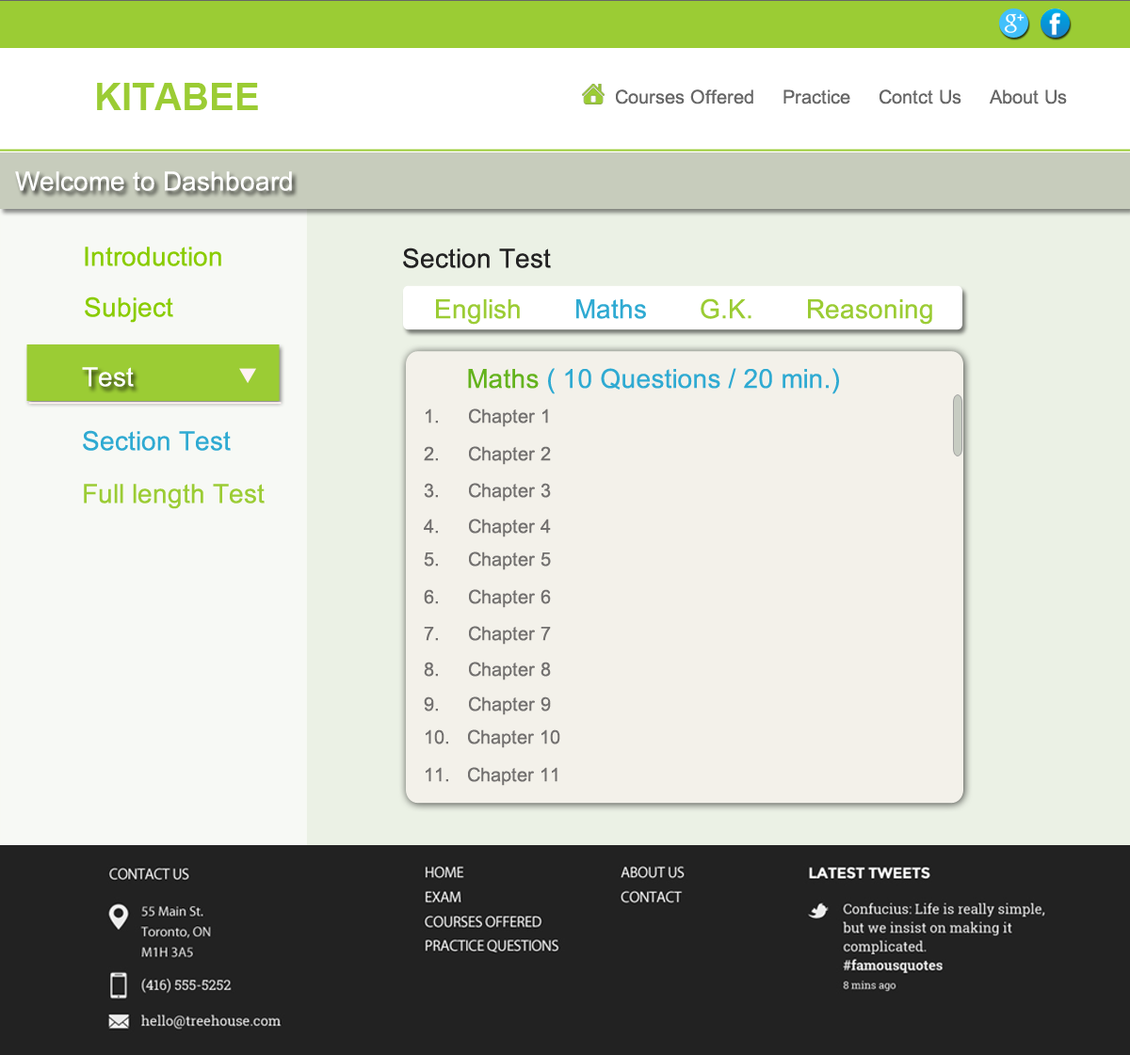
<style>
.page{position:relative;width:1130px;height:1055px}
.page>*{position:absolute;margin:0}
.t1{font:37.7px "Arial-BoldMT";color:#9bcc34}
.t2{font:18.8px "ArialMT";color:#666666}
.t3{font:26.4px "ArialMT";color:#ffffff}
.t4{font:26.4px "ArialMT";color:#8acc00}
.t5{font:26.4px "ArialMT";color:#222222}
.t6{font:26.4px "ArialMT";color:#9bcc34}
.t7{font:26.4px "ArialMT";color:#2faad2}
.t8{font:26.4px "ArialMT";color:#64b31d}
.t9{font:18.8px "ArialMT";color:#72706f}
</style>
<div class="page">
<p class="t1" style="left:97px;top:83px;width:161px;height:27px">KITABEE</p>
<p class="t2" style="left:616px;top:89px;width:451px;height:16px">Courses Offered     Practice     Contct Us     About Us</p>
<p class="t3" style="left:15px;top:171px;width:277px;height:20px">Welcome to Dashboard</p>
<p class="t4" style="left:85px;top:247px;width:136px;height:19px">Introduction</p>
<p class="t5" style="left:403px;top:248px;width:148px;height:20px">Section Test</p>
<p class="t4" style="left:85px;top:297px;width:88px;height:26px">Subject</p>
<p class="t6" style="left:436px;top:298px;width:496px;height:27px">English<span class="t7">       Maths     </span>  G.K.       Reasoning</p>
<p class="t3" style="left:82px;top:367px;width:52px;height:20px">Test</p>
<p class="t7" style="left:468px;top:368px;width:371px;height:26px"><span class="t8">Maths</span> ( 10 Questions / 20 min.)</p>
<p class="t9" style="left:426px;top:409px;width:122px;height:18px">1.     Chapter 1</p>
<p class="t7" style="left:83px;top:430px;width:148px;height:21px">Section Test</p>
<p class="t9" style="left:424px;top:446px;width:127px;height:19px">2.     Chapter 2</p>
<p class="t6" style="left:84px;top:484px;width:181px;height:25px">Full length Test</p>
<p class="t9" style="left:424px;top:483px;width:127px;height:19px">3.     Chapter 3</p>
<p class="t9" style="left:424px;top:519px;width:127px;height:19px">4.     Chapter 4</p>
<p class="t9" style="left:424px;top:552px;width:127px;height:19px">5.     Chapter 5</p>
<p class="t9" style="left:424px;top:589px;width:127px;height:19px">6.     Chapter 6</p>
<p class="t9" style="left:424px;top:626px;width:127px;height:19px">7.     Chapter 7</p>
<p class="t9" style="left:424px;top:662px;width:127px;height:19px">8.     Chapter 8</p>
<p class="t9" style="left:424px;top:697px;width:127px;height:19px">9.     Chapter 9</p>
<p class="t9" style="left:426px;top:730px;width:134px;height:18px">10.   Chapter 10</p>
<p class="t9" style="left:426px;top:767px;width:131px;height:19px">11.   Chapter 11</p>
</div>
